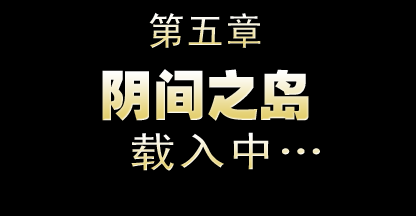
<style>
.page{position:relative;width:416px;height:216px;background:#000000}
.page>*{position:absolute;margin:0}
.t1{font:38px "SimHei";letter-spacing:0.03em;text-transform:uppercase}
.t2{font:53px "HeitiEG-Ultra-GB";text-transform:uppercase}
.t3{font:40.9px "SimHei";letter-spacing:0.03em;scale:1.18 1}
</style>
<div class="page">
<p class="t1" style="left:149px;top:12px;width:112px;height:36px">第五章</p>
<p class="t2" style="left:102px;top:69px;width:207px;height:52px">阴间之岛</p>
<p class="t3" style="left:131px;top:132px;width:189px;height:39px">载入中…</p>
</div>
